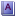
<style>
.page{position:relative;width:16px;height:16px}
.page>*{position:absolute;margin:0}
.t1{font:9px "MicrosoftSansSerif";color:#500950}
</style>
<div class="page">
<p class="t1" style="left:4px;top:3px;width:8px;height:7px">A</p>
</div>
